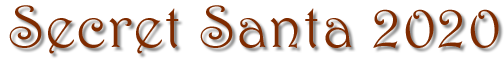
<style>
.page{position:relative;width:504px;height:61px;background:#ffffff}
.page>*{position:absolute;margin:0}
.t1{font:60px "Harrington";letter-spacing:0.025em;color:#7f2b00}
</style>
<div class="page">
<p class="t1" style="left:9px;top:5px;width:490px;height:49px">Secret Santa 2020</p>
</div>
